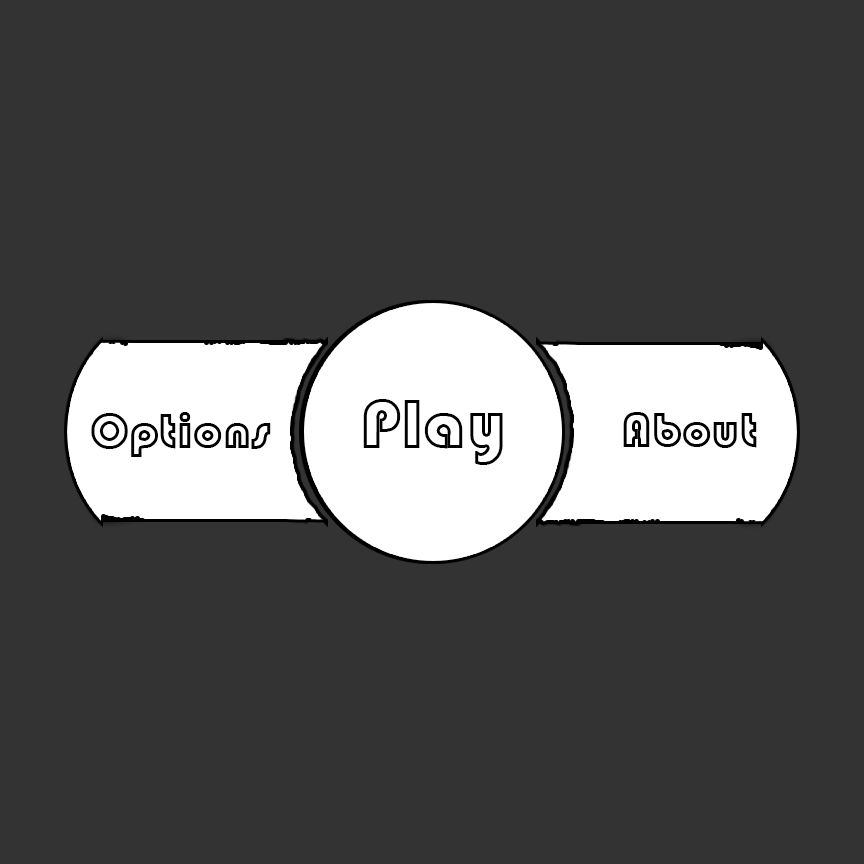
<style>
.page{position:relative;width:864px;height:864px;background:#333333}
.page>*{position:absolute;margin:0}
.t1{font:70px "Bauhaus93";font-weight:bold}
.t2{font:50px "Bauhaus93";font-weight:bold}
</style>
<div class="page">
<p class="t1" style="left:363px;top:399px;width:140px;height:66px">Play</p>
<p class="t2" style="left:91px;top:412px;width:180px;height:45px">Options</p>
<p class="t2" style="left:623px;top:412px;width:134px;height:36px">About</p>
</div>
